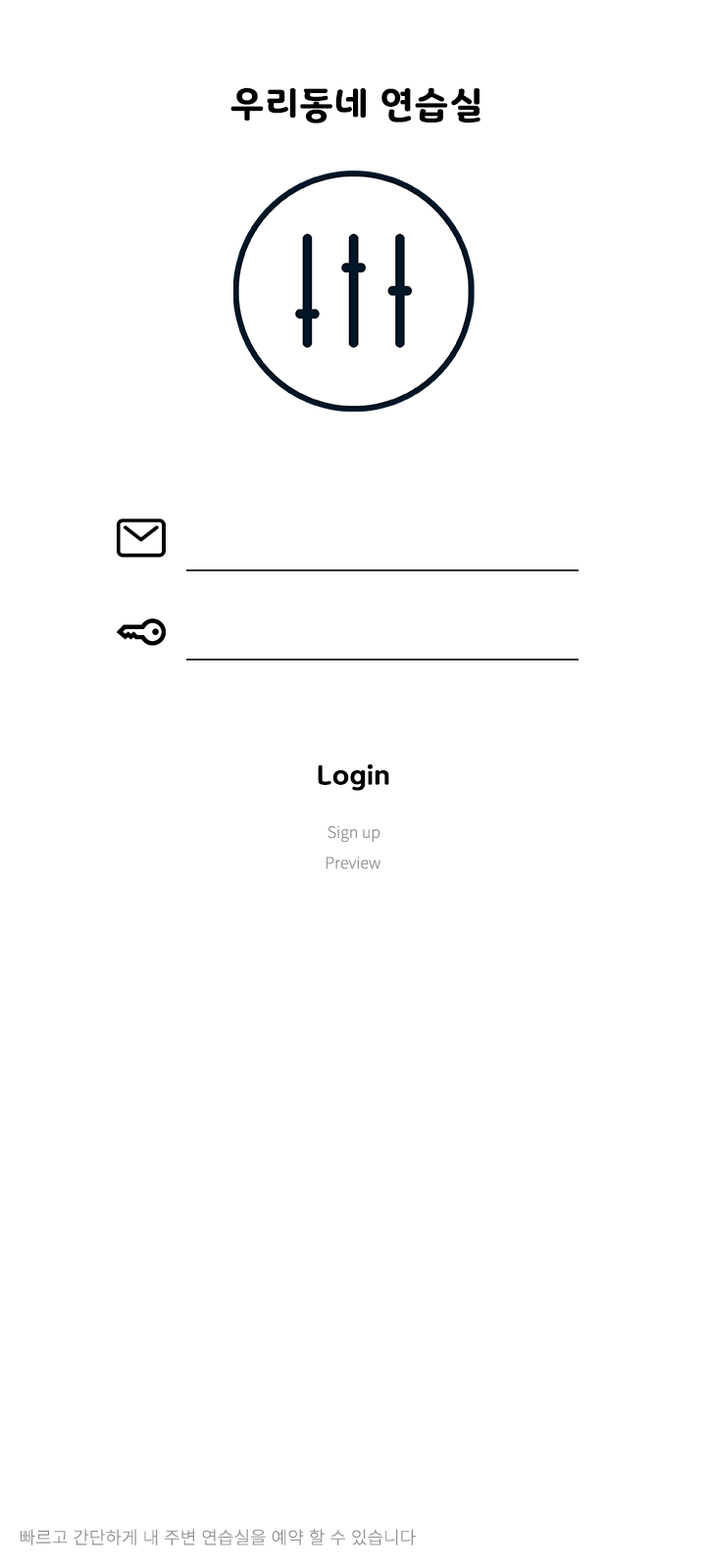
<style>
.page{position:relative;width:706px;height:1568px;background:#ffffff}
.page>*{position:absolute;margin:0}
.t1{font:35.3px "Binggrae-Bold";color:#000000}
.t2{font:25.5px "Binggrae-Bold";color:#000000}
.t3{font:15.7px "NotoSansCJKkr-Light";color:#8d8d8d}
.t4{font:17.6px "NotoSansCJKkr-Light";color:#8d8d8d}
</style>
<div class="page">
<p class="t1" style="left:230px;top:87px;width:250px;height:36px">우리동네 연습실</p>
<p class="t2" style="left:318px;top:764px;width:71px;height:27px">Login</p>
<p class="t3" style="left:327px;top:825px;width:53px;height:18px">Sign up</p>
<p class="t3" style="left:326px;top:857px;width:54px;height:12px">Preview</p>
<p class="t4" style="left:21px;top:1529px;width:395px;height:16px">빠르고 간단하게 내 주변 연습실을 예약 할 수 있습니다</p>
</div>
